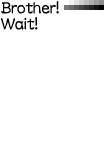
<style>
.page{position:relative;width:104px;height:160px;background:#ffffff}
.page>*{position:absolute;margin:0}
.t1{font:19px/16px "DFLeiSho-SB-WINP-RKSJ-H";color:#000000;scale:0.84 1}
</style>
<div class="page">
<p class="t1" style="left:0px;top:1px;width:59px;height:29px">Brother!<br>Wait!</p>
</div>
